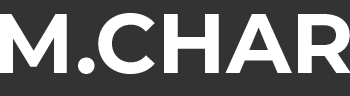
<style>
.page{position:relative;width:350px;height:96px;background:#333333}
.page>*{position:absolute;margin:0}
.t1{font:84.9px "Montserrat-Bold";color:#ffffff;text-transform:uppercase}
</style>
<div class="page">
<p class="t1" style="left:0px;top:13px;width:351px;height:61px">M.CHAR</p>
</div>
